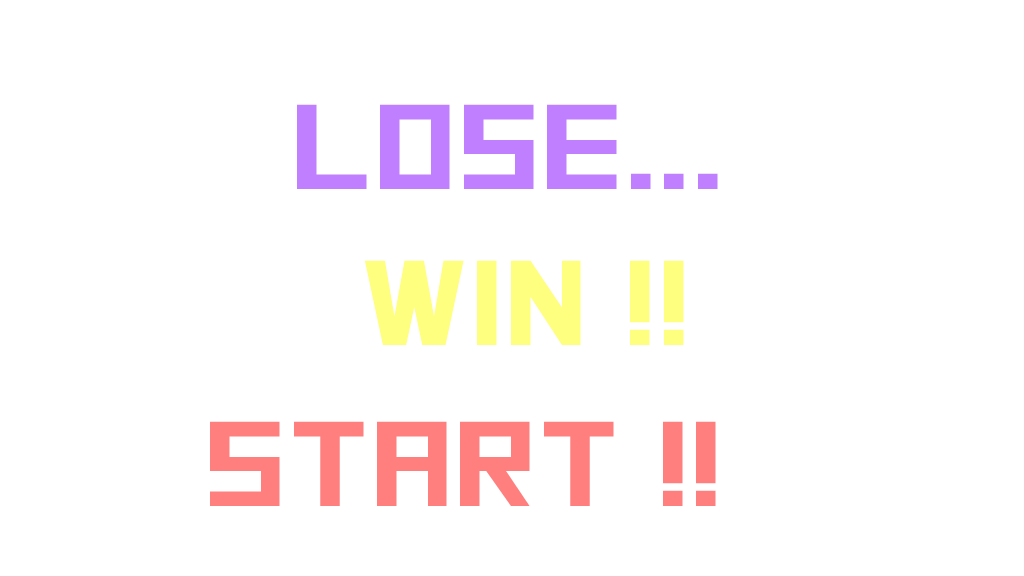
<style>
.page{position:relative;width:1024px;height:576px;background:#ffffff}
.page>*{position:absolute;margin:0}
.t1{font:120px "SquareFont";color:#bf7fff;scale:1.2 1}
.t2{font:120px "SquareFont";color:#ffff7f;scale:1.2 1}
.t3{font:120px "SquareFont";color:#ff7f7f;scale:1.2 1}
</style>
<div class="page">
<p class="t1" style="left:297px;top:104px;width:421px;height:85px">LOSE...</p>
<p class="t2" style="left:365px;top:260px;width:319px;height:85px">WIN !!</p>
<p class="t3" style="left:210px;top:421px;width:506px;height:85px">START !!</p>
</div>
